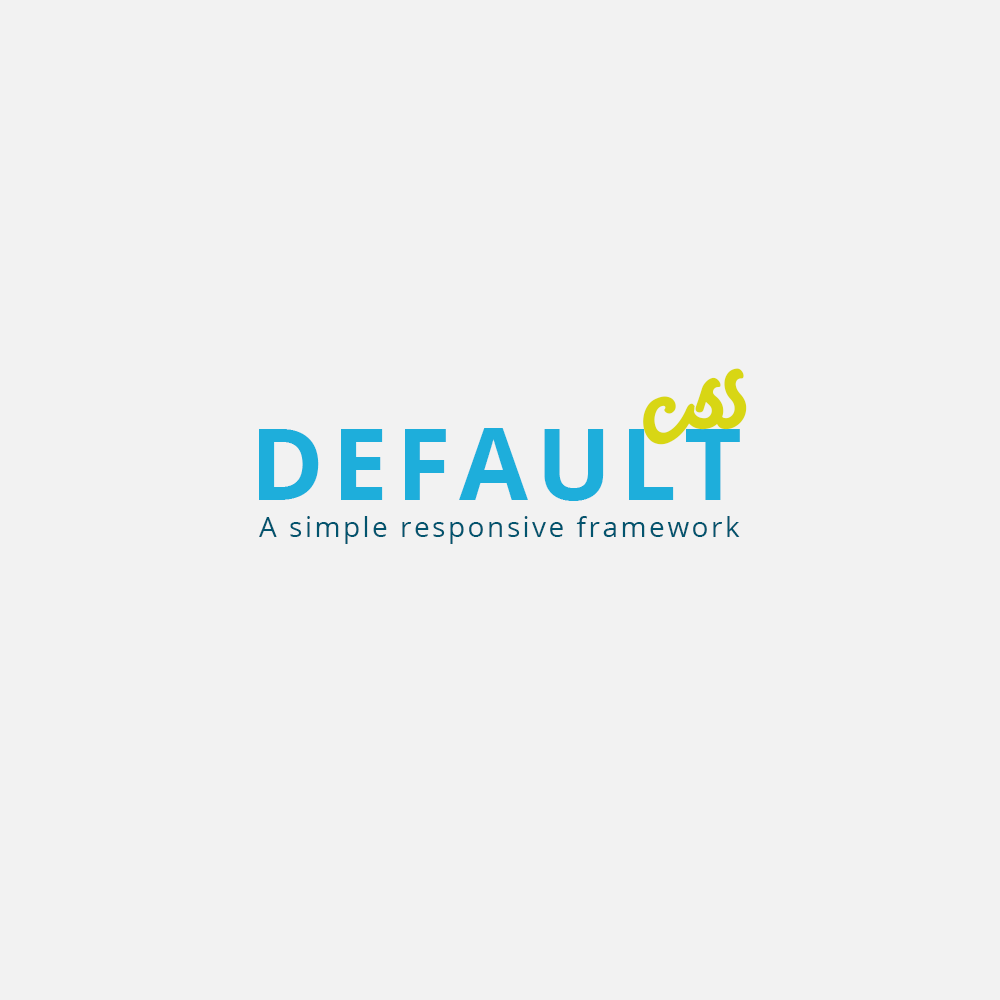
<style>
.page{position:relative;width:1000px;height:1000px;background:#f2f2f2}
.page>*{position:absolute;margin:0}
.t1{font:133.5px "AtelasPersonalUseOnly";letter-spacing:0.08em;color:#d8d614}
.t2{font:100px "OpenSans-Bold";letter-spacing:0.08em;color:#1eaedb}
.t3{font:28.4px "OpenSans-Regular";letter-spacing:0.08em;color:#02546e}
</style>
<div class="page">
<p class="t1" style="left:643px;top:368px;width:104px;height:77px;rotate:-17deg">css</p>
<p class="t2" style="left:259px;top:428px;width:481px;height:73px">DEFAULT</p>
<p class="t3" style="left:259px;top:516px;width:481px;height:28px">A simple responsive framework</p>
</div>
